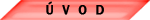
<style>
.page{position:relative;width:150px;height:20px}
.page>*{position:absolute;margin:0}
.t1{font:13px "FranklinGothic-Medium";letter-spacing:0.66em;color:#000000;text-transform:uppercase;font-weight:bold}
</style>
<div class="page">
<p class="t1" style="left:46px;top:1px;width:58px;height:14px">ÚVOD</p>
</div>
